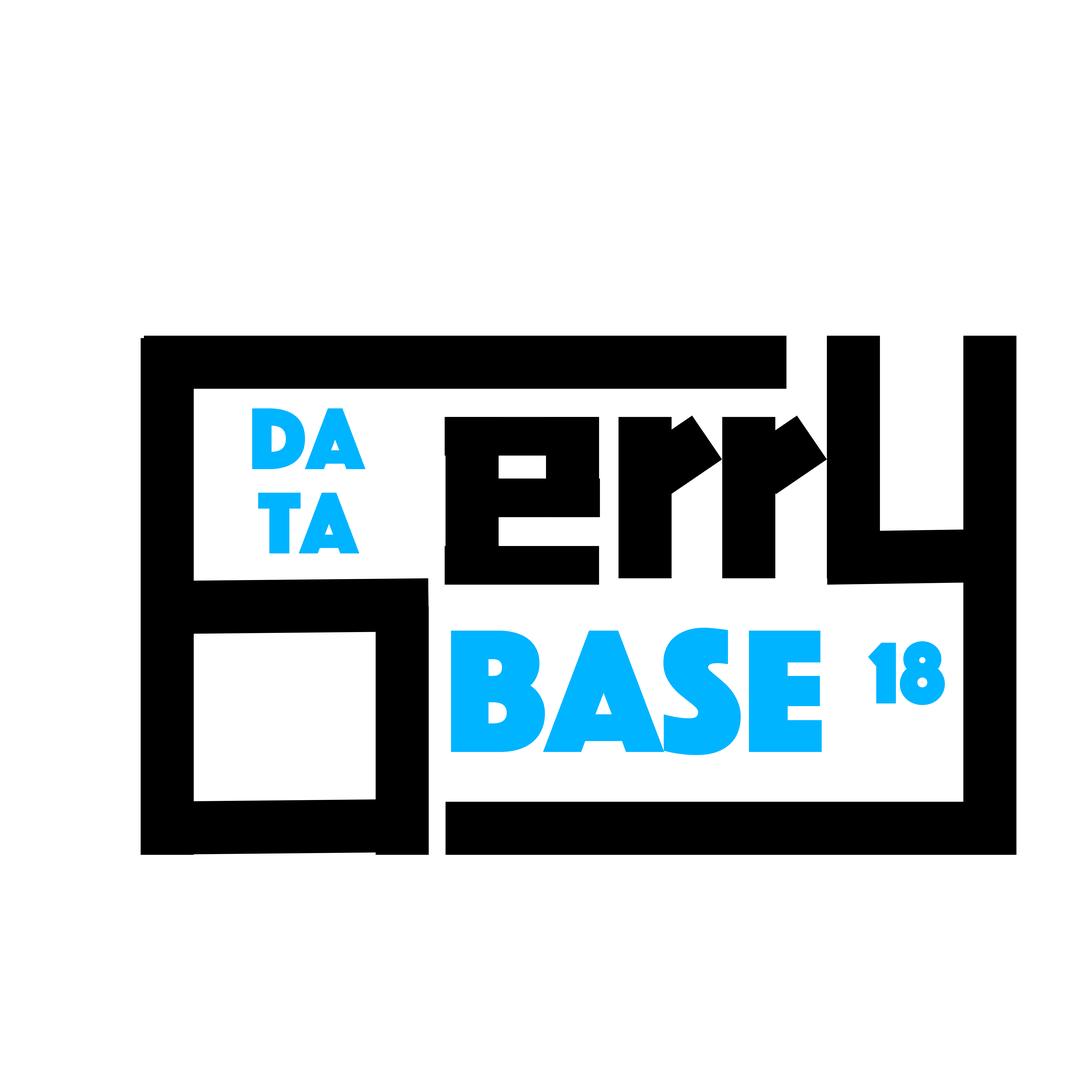
<style>
.page{position:relative;width:1092px;height:1092px;background:#ffffff}
.page>*{position:absolute;margin:0}
.t1{font:91px "Phosphate-Solid";color:#00b4ff}
.t2{font:182px "Phosphate-Solid";color:#00b4ff}
</style>
<div class="page">
<p class="t1" style="left:252px;top:408px;width:114px;height:61px">DA</p>
<p class="t1" style="left:258px;top:492px;width:101px;height:61px">ta</p>
<p class="t2" style="left:451px;top:628px;width:371px;height:127px">BASE</p>
<p class="t1" style="left:868px;top:641px;width:77px;height:64px">18</p>
</div>
